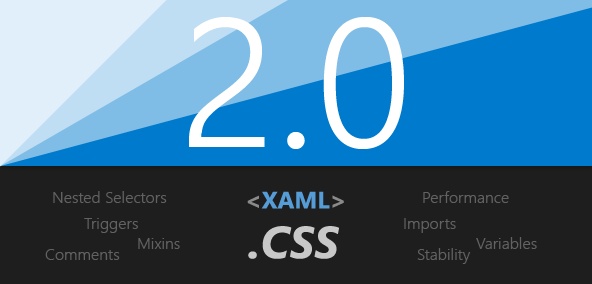
<style>
.page{position:relative;width:592px;height:284px;background:#1e1e1e}
.page>*{position:absolute;margin:0}
.t1{font:182px "SegoeUI-Semilight";color:#ffffff}
.t2{font:16px "SegoeUI-Semilight";color:#626262}
</style>
<div class="page">
<p class="t1" style="left:189px;top:17px;width:215px;height:132px">2.0</p>
<p class="t2" style="left:53px;top:191px;width:114px;height:12px">Nested Selectors</p>
<p class="t2" style="left:423px;top:191px;width:86px;height:12px">Performance</p>
<p class="t2" style="left:84px;top:218px;width:54px;height:15px">Triggers</p>
<p class="t2" style="left:404px;top:218px;width:52px;height:15px">Imports</p>
<p class="t2" style="left:138px;top:238px;width:42px;height:11px">Mixins</p>
<p class="t2" style="left:476px;top:237px;width:61px;height:12px">Variables</p>
<p class="t2" style="left:45px;top:249px;width:75px;height:11px">Comments</p>
<p class="t2" style="left:417px;top:248px;width:54px;height:16px">Stability</p>
</div>
